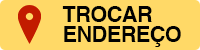
<style>
.page{position:relative;width:200px;height:50px;background:#ffd967}
.page>*{position:absolute;margin:0}
.t1{font:21.7px/20px "Helvetica-Bold";letter-spacing:-0.025em;color:#010101}
</style>
<div class="page">
<p class="t1" style="left:62px;top:6px;width:119px;height:41px">TROCAR<br>ENDEREÇO</p>
</div>
